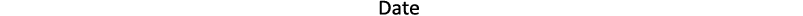
<style>
.page{position:relative;width:803px;height:16px;background:#ffffff}
.page>*{position:absolute;margin:0}
.t1{font:21.4px "Calibri";color:#000000;scale:1.03 1}
</style>
<div class="page">
<p class="t1" style="left:379px;top:0px;width:40px;height:15px">Date</p>
</div>
